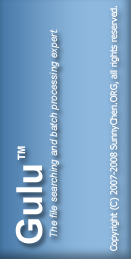
<style>
.page{position:relative;width:131px;height:259px}
.page>*{position:absolute;margin:0}
.t1{font:9px "Tahoma";color:#ffffff}
.t2{font:10px "Arial-ItalicMT";color:#ffffff}
.t3{font:10px "Arial-BoldMT";color:#ffffff}
.t4{font:36px "Arial-BoldMT";color:#ffffff}
</style>
<div class="page">
<p class="t1" style="left:110px;top:6px;width:9px;height:245px;rotate:-90deg">Copyright (C) 2007-2008 SunnyChen.ORG, all rights reserved.</p>
<p class="t2" style="left:49px;top:29px;width:11px;height:208px;rotate:-90deg">The file searching and batch processing expert.</p>
<p class="t3" style="left:17px;top:146px;width:9px;height:14px;rotate:-90deg">TM</p>
<p class="t4" style="left:15px;top:165px;width:28px;height:79px;rotate:-90deg">Gulu</p>
</div>
